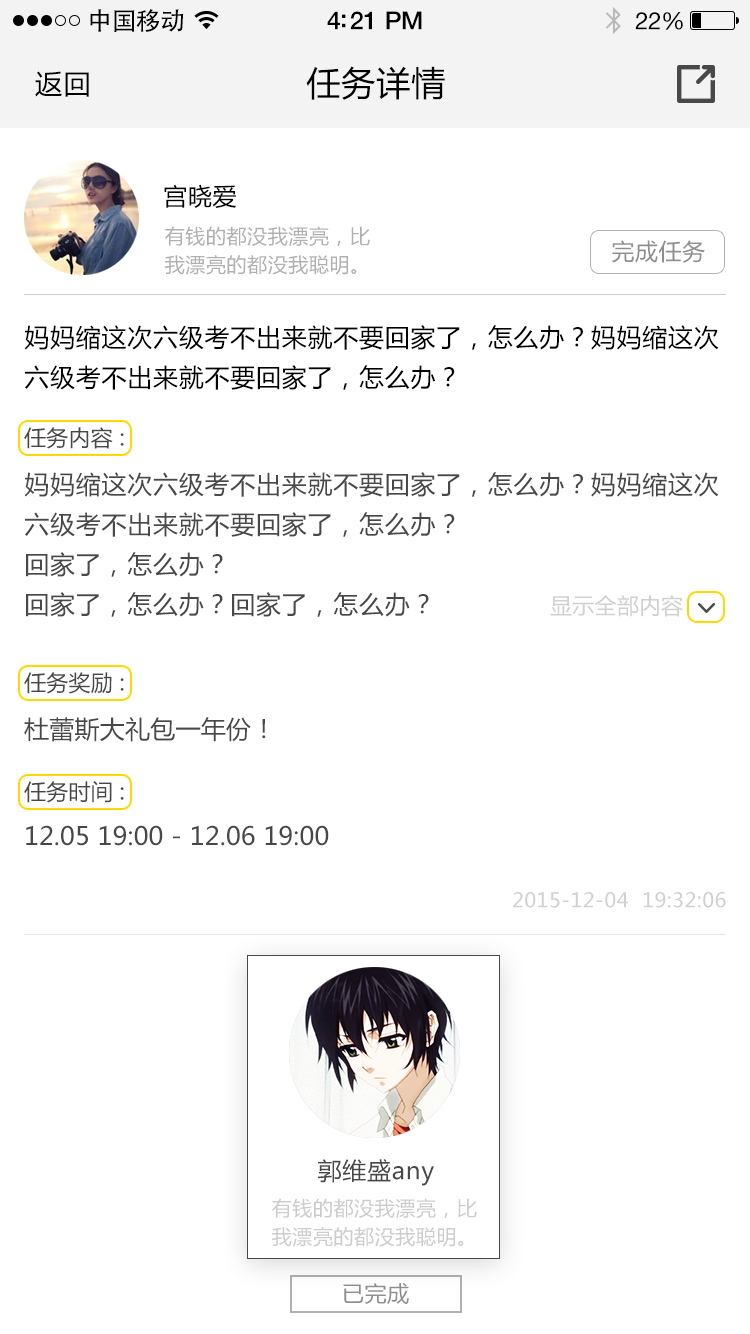
<style>
.page{position:relative;width:750px;height:1334px;background:#ffffff}
.page>*{position:absolute;margin:0}
.t1{font:25px "AdobeHeitiStd-Regular";letter-spacing:-0.025em;color:#000000}
.t2{font:25px "HelveticaNeue-Medium";letter-spacing:-0.02em;color:#000000}
.t3{font:24px "HelveticaNeue";letter-spacing:-0.02em;color:#000000}
.t4{font:27px "MicrosoftYaHei";letter-spacing:0.05em;color:#000000}
.t5{font:34px "MicrosoftYaHei";letter-spacing:0.03em;color:#000000}
.t6{font:24px "MicrosoftYaHei";letter-spacing:0.03em;color:#000000}
.t7{font:20px/70px "MicrosoftYaHei";letter-spacing:0.03em;color:#b0b0b0}
.t8{font:23px "MicrosoftYaHei";letter-spacing:0.03em;color:#8e8e8e}
.t9{font:25px/70px "MicrosoftYaHei";letter-spacing:0.03em;color:#000000}
.t10{font:22px "MicrosoftYaHei";letter-spacing:0.01em;color:#555555}
.t11{font:25px/70px "MicrosoftYaHei";letter-spacing:0.03em;color:#484848}
.t12{font:22px "MicrosoftYaHei";letter-spacing:0.01em;color:#d0d0d0}
.t13{font:25px "MicrosoftYaHei";letter-spacing:0.01em;color:#484848}
.t14{font:25px "MicrosoftYaHei";letter-spacing:0.01em;color:#555555}
.t15{font:20px "MicrosoftYaHei";letter-spacing:0.03em;color:#d0d0d0}
.t16{font:24px "MicrosoftYaHei";letter-spacing:0.03em;color:#484848}
.t17{font:20px/70px "MicrosoftYaHei";letter-spacing:0.03em;color:#cccccc}
.t18{font:22px "MicrosoftYaHei";letter-spacing:0.03em;color:#8e8e8e}
</style>
<div class="page">
<p class="t1" style="left:90px;top:9px;width:94px;height:23px">中国移动</p>
<p class="t2" style="left:327px;top:11px;width:95px;height:19px">4:21 PM</p>
<p class="t3" style="left:635px;top:12px;width:48px;height:18px">22%</p>
<p class="t4" style="left:35px;top:71px;width:54px;height:26px">返回</p>
<p class="t5" style="left:306px;top:66px;width:139px;height:34px">任务详情</p>
<p class="t6" style="left:164px;top:184px;width:73px;height:24px">宫晓爱</p>
<p class="t7" style="left:165px;top:226px;width:205px;height:49px">有钱的都没我漂亮，比<br>我漂亮的都没我聪明。</p>
<p class="t8" style="left:612px;top:240px;width:93px;height:23px">完成任务</p>
<p class="t9" style="left:24px;top:325px;width:695px;height:65px">妈妈缩这次六级考不出来就不要回家了，怎么办？妈妈缩这次<br>六级考不出来就不要回家了，怎么办？</p>
<p class="t10" style="left:24px;top:427px;width:100px;height:22px">任务内容 :</p>
<p class="t11" style="left:24px;top:472px;width:695px;height:145px">妈妈缩这次六级考不出来就不要回家了，怎么办？妈妈缩这次<br>六级考不出来就不要回家了，怎么办？<br>回家了，怎么办？<br>回家了，怎么办？回家了，怎么办？</p>
<p class="t12" style="left:550px;top:595px;width:133px;height:22px">显示全部内容</p>
<p class="t10" style="left:24px;top:672px;width:100px;height:22px">任务奖励 :</p>
<p class="t13" style="left:24px;top:717px;width:242px;height:25px">杜蕾斯大礼包一年份！</p>
<p class="t10" style="left:24px;top:781px;width:100px;height:22px">任务时间 :</p>
<p class="t14" style="left:26px;top:825px;width:303px;height:21px">12.05 19:00 - 12.06 19:00</p>
<p class="t15" style="left:513px;top:892px;width:213px;height:16px">2015-12-04  19:32:06</p>
<p class="t16" style="left:318px;top:1159px;width:116px;height:27px">郭维盛any</p>
<p class="t17" style="left:272px;top:1198px;width:205px;height:49px">有钱的都没我漂亮，比<br>我漂亮的都没我聪明。</p>
<p class="t18" style="left:343px;top:1283px;width:66px;height:21px">已完成</p>
</div>
